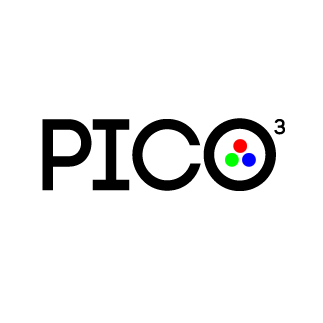
<style>
.page{position:relative;width:323px;height:323px;background:#ffffff}
.page>*{position:absolute;margin:0}
.t1{font:101.1px "Code-Bold";color:#000000}
.t2{font:21.5px "Code-Bold";color:#000000}
</style>
<div class="page">
<p class="t1" style="left:42px;top:118px;width:234px;height:73px">Pico</p>
<p class="t2" style="left:274px;top:119px;width:11px;height:16px">3</p>
</div>
